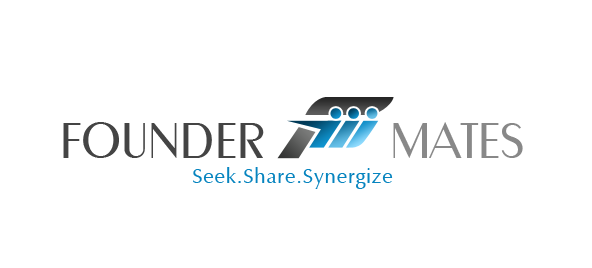
<style>
.page{position:relative;width:592px;height:268px;background:#ffffff}
.page>*{position:absolute;margin:0}
.t1{font:50px "Metro";color:#444444;text-transform:uppercase}
.t2{font:50px "Metro";color:#888888;text-transform:uppercase}
.t3{font:20.8px "ZapfHumanist601BT-Roman";letter-spacing:0.04em;color:#0684bf}
</style>
<div class="page">
<p class="t1" style="left:63px;top:122px;width:460px;height:36px">Founder     <span class="t2">Mates</span></p>
<p class="t3" style="left:193px;top:167px;width:200px;height:22px">Seek.Share.Synergize</p>
</div>
